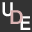
<style>
.page{position:relative;width:32px;height:32px;background:#333333}
.page>*{position:absolute;margin:0}
.t1{font:19.1px "Arial-BoldMT";color:#ffffff;scale:0.97 1}
.t2{font:19.1px "Arial-BoldMT";color:#dab4b4;scale:1.04 1}
</style>
<div class="page">
<p class="t1" style="left:2px;top:2px;width:11px;height:15px">U</p>
<p class="t2" style="left:10px;top:10px;width:13px;height:14px">D</p>
<p class="t1" style="left:20px;top:16px;width:11px;height:14px">E</p>
</div>
